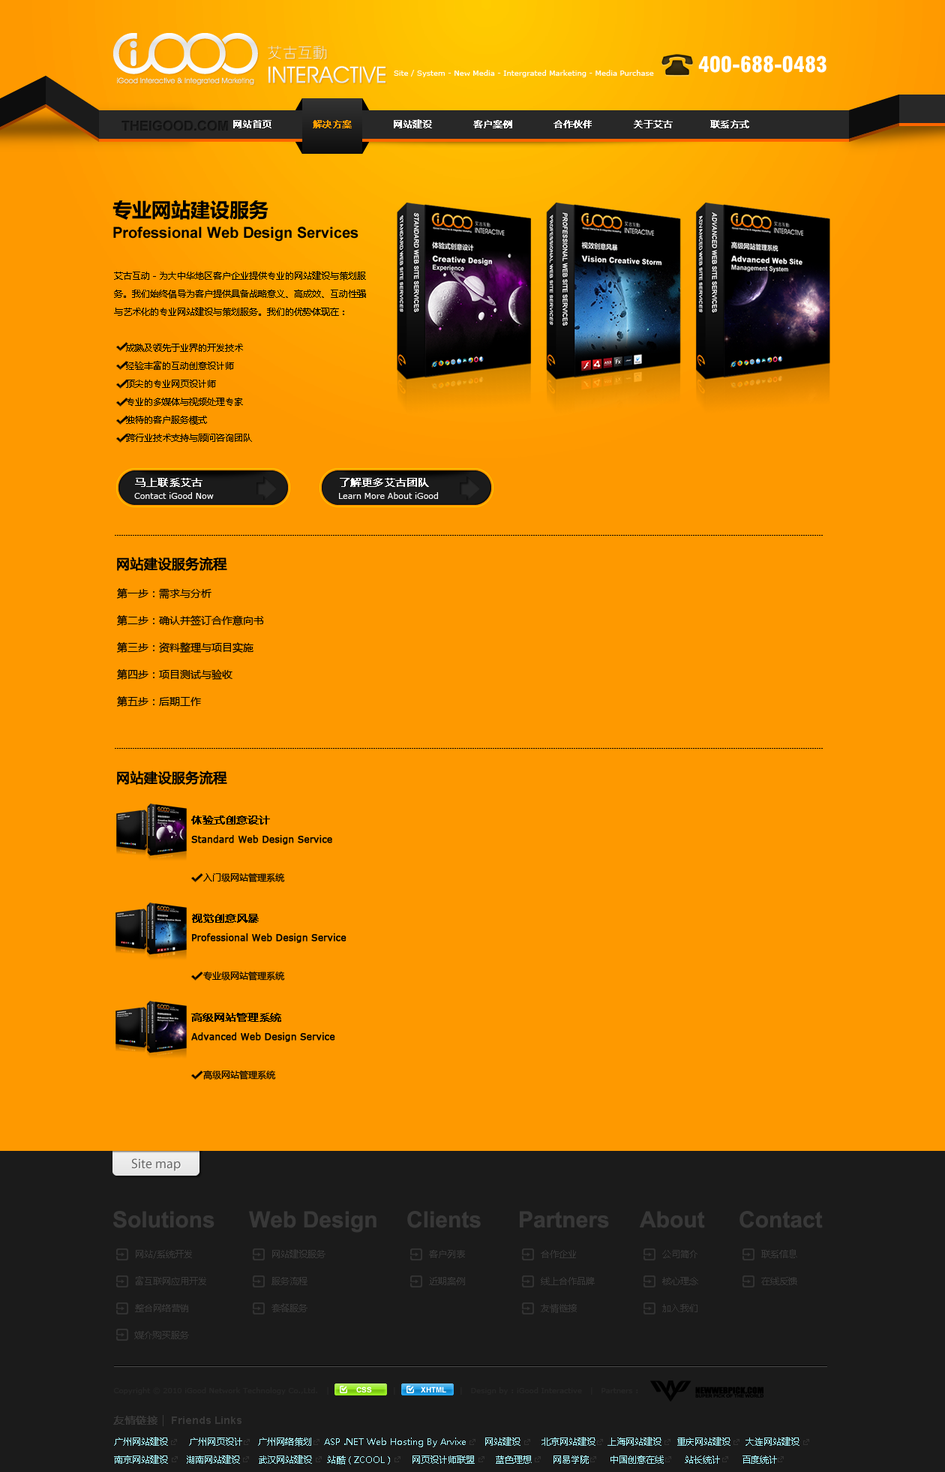
<style>
.page{position:relative;width:945px;height:1472px;background:#fe9900}
.page>*{position:absolute;margin:0}
.t1{font:21px "Swiss721BT-BlackCondensed";color:#ffffff}
.t2{font:7.5px "Verdana";color:#ffffff}
.t3{font:9px "MicrosoftYaHei";color:#ffffff;font-weight:bold}
.t4{font:9px "MicrosoftYaHei";color:#ff9e01;font-weight:bold}
.t5{font:9px/18px "MicrosoftYaHei";color:#000000}
.t6{font:10.5px "MicrosoftYaHei";color:#ffffff;font-weight:bold}
.t7{font:8.2px "Verdana";color:#ffffff}
.t8{font:6px "BookAntiqua";color:#000000;font-weight:bold}
.t9{font:13.5px "MicrosoftYaHei";color:#000000;font-weight:bold}
.t10{font:10.5px/27px "MicrosoftYaHei";color:#000000}
.t11{font:10.5px "MicrosoftYaHei";color:#000000;font-weight:bold}
.t12{font:9px "Verdana";color:#000000;font-weight:bold}
.t13{font:9px "MicrosoftYaHei";color:#000000}
.t14{font:22.5px "Arial-BoldMT";color:#383838}
.t15{font:9px/27px "MicrosoftYaHei";color:#383838}
.t16{font:10.5px "MicrosoftYaHei";color:#383838;font-weight:bold}
.t17{font:10.5px "MicrosoftYaHei";color:#383838}
.t18{font:10.5px "Arial-BoldMT";color:#383838}
.t19{font:9px/18px "MicrosoftYaHei";color:#a8f8ff}
</style>
<div class="page">
<p class="t1" style="left:698px;top:56px;width:128px;height:17px">400-688-0483</p>
<p class="t2" style="left:394px;top:70px;width:260px;height:7px">Site / System - New Media - Intergrated Marketing - Media Purchase</p>
<p class="t3" style="left:233px;top:119px;width:516px;height:9px">网站首页           <span class="t4">解决方案 </span>          网站建设           客户案例           合作伙伴           关于艾古          联系方式</p>
<p class="t5" style="left:114px;top:271px;width:252px;height:171px">艾古互动－为大中华地区客户企业提供专业的网站建设与策划服<br>务。我们始终倡导为客户提供具备战略意义、高成效、互动性强<br>与艺术化的专业网站建设与策划服务。我们的优势体现在：<br><br>    成熟及领先于业界的开发技术<br>    经验丰富的互动创意设计师<br>    顶尖的专业网页设计师<br>    专业的多媒体与视频处理专家<br>    独特的客户服务模式<br>    跨行业技术支持与顾问咨询团队</p>
<p class="t6" style="left:135px;top:478px;width:67px;height:9px">马上联系艾古</p>
<p class="t6" style="left:340px;top:478px;width:89px;height:9px">了解更多艾古团队</p>
<p class="t7" style="left:134px;top:492px;width:80px;height:7px">Contact iGood Now</p>
<p class="t7" style="left:339px;top:492px;width:99px;height:7px">Learn More About iGood</p>
<p class="t8" style="left:115px;top:535px;width:708px;height:1px">...........................................................................................................................................................................................................................................................................................................................</p>
<p class="t9" style="left:117px;top:556px;width:110px;height:15px">网站建设服务流程</p>
<p class="t10" style="left:117px;top:588px;width:147px;height:118px">第一步：需求与分析<br>第二步：确认并签订合作意向书<br>第三步：资料整理与项目实施<br>第四步：项目测试与验收<br>第五步：后期工作</p>
<p class="t8" style="left:115px;top:748px;width:708px;height:0px">...........................................................................................................................................................................................................................................................................................................................</p>
<p class="t9" style="left:117px;top:770px;width:110px;height:14px">网站建设服务流程</p>
<p class="t11" style="left:191px;top:815px;width:79px;height:9px">体验式创意设计</p>
<p class="t12" style="left:191px;top:835px;width:141px;height:9px">Standard Web Design Service</p>
<p class="t13" style="left:203px;top:872px;width:82px;height:10px">入门级网站管理系统</p>
<p class="t11" style="left:192px;top:914px;width:67px;height:8px">视觉创意风暴</p>
<p class="t12" style="left:192px;top:933px;width:154px;height:10px">Professional Web Design Service</p>
<p class="t13" style="left:203px;top:970px;width:82px;height:10px">专业级网站管理系统</p>
<p class="t11" style="left:191px;top:1012px;width:90px;height:10px">高级网站管理系统</p>
<p class="t12" style="left:191px;top:1032px;width:144px;height:10px">Advanced Web Design Service</p>
<p class="t13" style="left:203px;top:1070px;width:73px;height:9px">高级网站管理系统</p>
<p class="t14" style="left:113px;top:1210px;width:101px;height:18px">Solutions</p>
<p class="t14" style="left:249px;top:1210px;width:127px;height:22px">Web Design</p>
<p class="t14" style="left:407px;top:1210px;width:74px;height:18px">Clients</p>
<p class="t14" style="left:520px;top:1210px;width:89px;height:18px">Partners</p>
<p class="t14" style="left:640px;top:1210px;width:65px;height:18px">About</p>
<p class="t14" style="left:740px;top:1210px;width:83px;height:18px">Contact</p>
<p class="t15" style="left:134px;top:1250px;width:72px;height:89px">网站/系统开发 <br>富互联网应用开发 <br>整合网络营销 <br>媒介购买服务</p>
<p class="t15" style="left:272px;top:1249px;width:54px;height:63px">网站建设服务 <br>服务流程 <br>套餐服务</p>
<p class="t15" style="left:429px;top:1250px;width:36px;height:35px">客户列表 <br>近期案例</p>
<p class="t15" style="left:541px;top:1250px;width:54px;height:62px">合作企业 <br>线上合作品牌 <br>友情链接</p>
<p class="t15" style="left:662px;top:1250px;width:36px;height:62px">公司简介 <br>核心理念 <br>加入我们</p>
<p class="t15" style="left:761px;top:1249px;width:36px;height:36px">联系信息 <br>在线反馈</p>
<p class="t16" style="left:113px;top:1414px;width:51px;height:12px">友情链接 <span class="t17">|</span></p>
<p class="t18" style="left:172px;top:1416px;width:70px;height:8px">Friends Links</p>
<p class="t19" style="left:114px;top:1436px;width:686px;height:28px">广州网站建设       广州网页设计     广州网络策划    ASP .NET Web Hosting By Arvixe      网站建设       北京网站建设    上海网站建设     重庆网站建设     大连网站建设 <br>南京网站建设      湖南网站建设      武汉网站建设     站酷（ZCOOL）      网页设计师联盟       蓝色理想       网易学院       中国创意在线       站长统计       百度统计</p>
</div>
